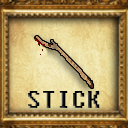
<style>
.page{position:relative;width:128px;height:128px}
.page>*{position:absolute;margin:0}
.t1{font:24px "Fixedsys"}
</style>
<div class="page">
<p class="t1" style="left:28px;top:91px;width:72px;height:17px">STICK</p>
</div>
